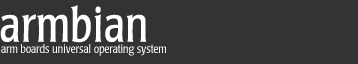
<style>
.page{position:relative;width:358px;height:64px;background:#333333}
.page>*{position:absolute;margin:0}
.t1{font:48px "Poppl-Laudatio-CondensedLight";color:#ffffff;font-weight:bold}
.t2{font:12px "Poppl-Laudatio-CondensedLight";color:#ffffff}
</style>
<div class="page">
<p class="t1" style="left:0px;top:5px;width:147px;height:38px">armbian</p>
<p class="t2" style="left:1px;top:44px;width:165px;height:12px">arm boards universal operating system</p>
</div>
